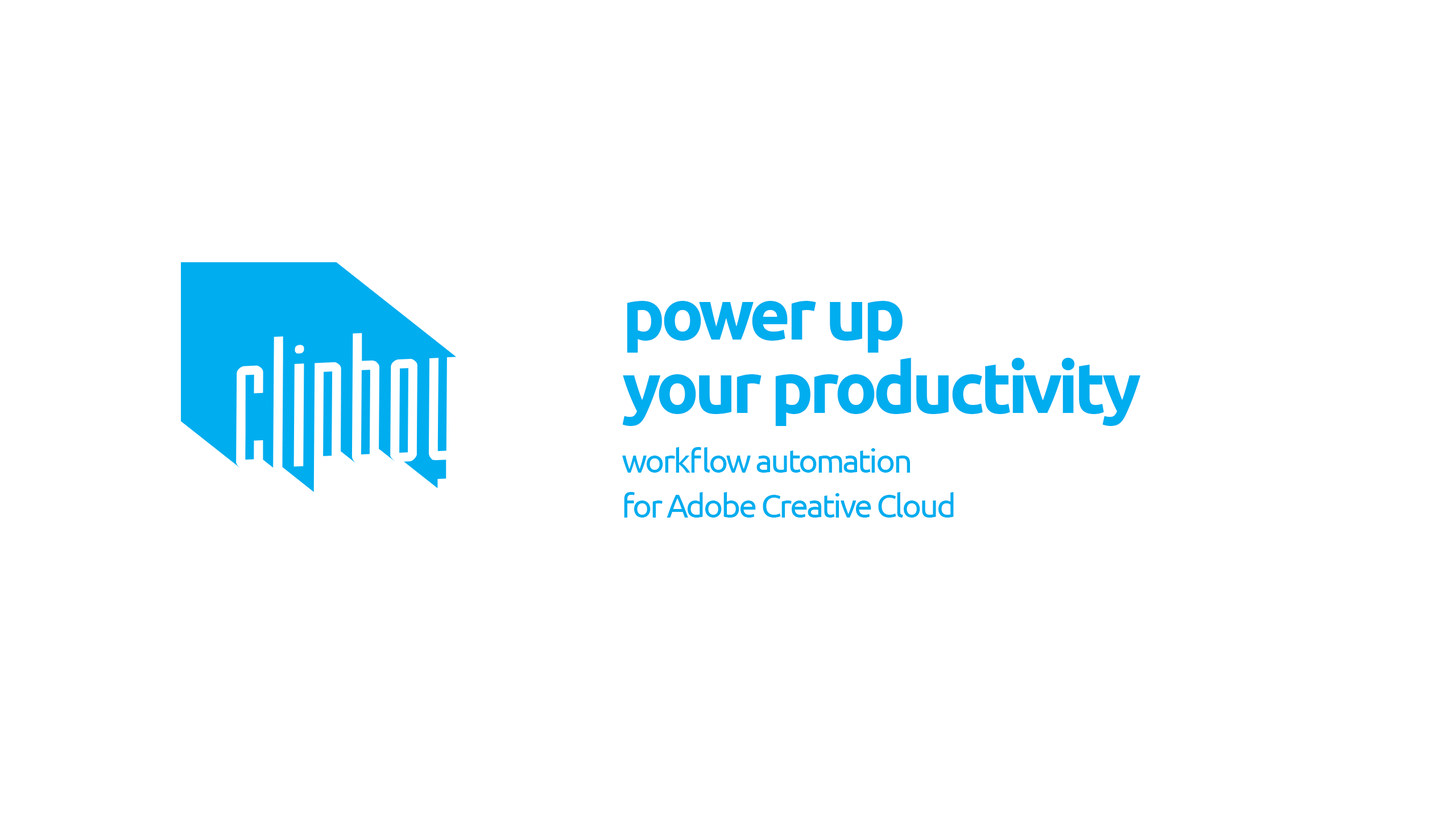
<style>
.page{position:relative;width:1456px;height:819px;background:#ffffff}
.page>*{position:absolute;margin:0}
.t1{font:71.1px/73.5px "Ubuntu-Bold";letter-spacing:-0.06em;color:#00adef}
.t2{font:33.2px/45px "Ubuntu";letter-spacing:-0.06em;color:#00adef}
</style>
<div class="page">
<p class="t1" style="left:622px;top:301px;width:519px;height:125px">power up<br>your productivity</p>
<p class="t2" style="left:622px;top:447px;width:332px;height:71px">workflow automation<br>for Adobe Creative Cloud</p>
</div>
